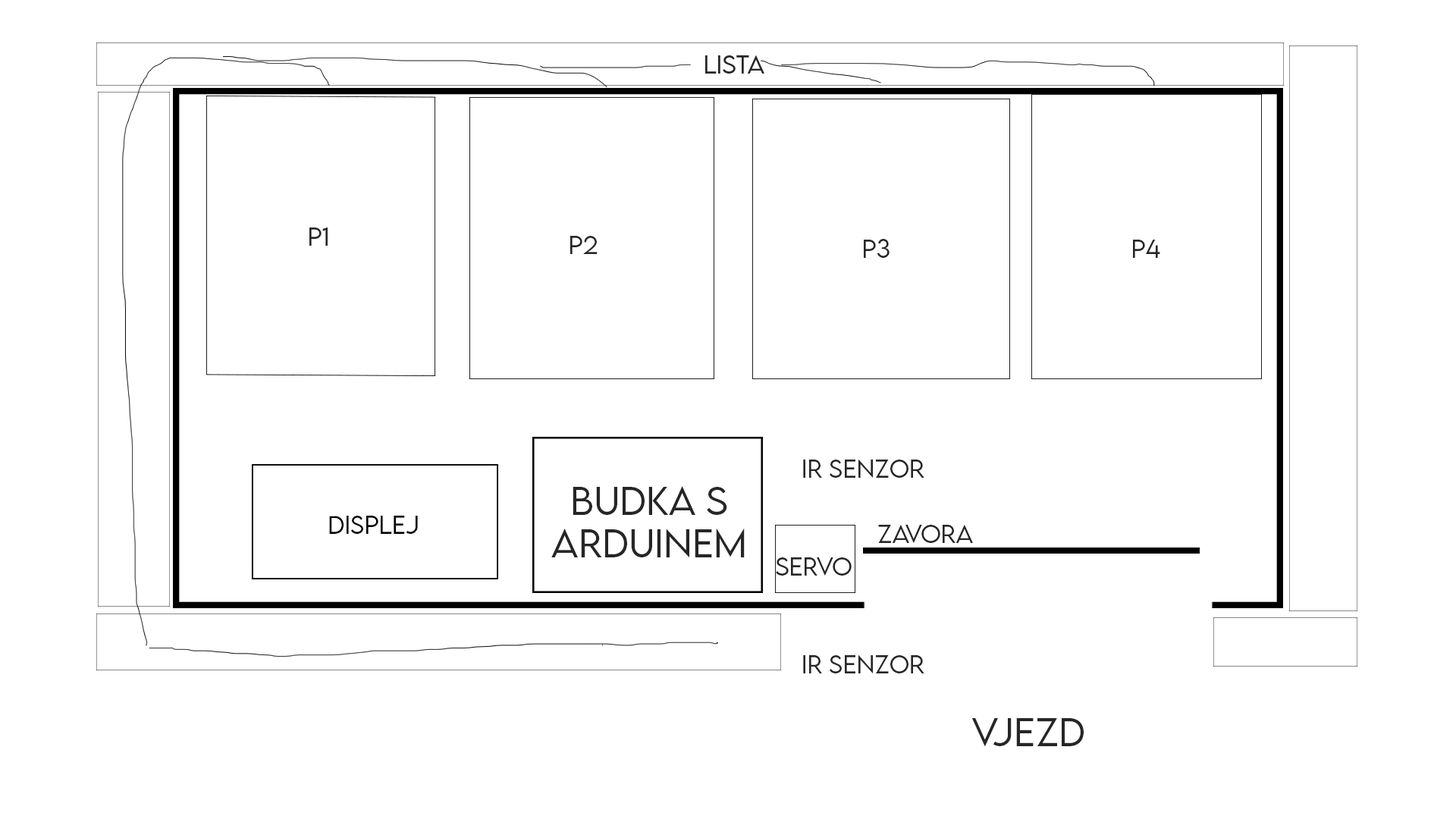
<style>
.page{position:relative;width:1456px;height:819px;background:#ffffff}
.page>*{position:absolute;margin:0}
.t1{font:22.7px "LEMONMILK-Light";color:#262626}
.t2{font:35.6px "LEMONMILK-Light";color:#262626}
.t3{font:22.7px "LEMONMILK-Light";color:#000000}
</style>
<div class="page">
<p class="t1" style="left:309px;top:227px;width:19px;height:19px">p1</p>
<p class="t1" style="left:570px;top:236px;width:28px;height:18px">p2</p>
<p class="t1" style="left:864px;top:239px;width:26px;height:19px">p3</p>
<p class="t1" style="left:1133px;top:240px;width:27px;height:18px">p4</p>
<p class="t1" style="left:803px;top:459px;width:121px;height:19px">ir senzor</p>
<p class="t2" style="left:551px;top:486px;width:194px;height:71px;text-align:center">budka s <br>arduinem</p>
<p class="t3" style="left:329px;top:516px;width:89px;height:18px">displej</p>
<p class="t1" style="left:878px;top:525px;width:95px;height:18px">zavora</p>
<p class="t1" style="left:776px;top:557px;width:76px;height:19px">servo</p>
<p class="t1" style="left:803px;top:654px;width:121px;height:19px">IR senzor</p>
<p class="t2" style="left:971px;top:718px;width:113px;height:28px">Vjezd</p>
</div>
